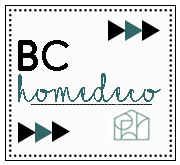
<style>
.page{position:relative;width:180px;height:165px;background:#fbfbfb}
.page>*{position:absolute;margin:0}
.t1{font:48px "AntipastoPro-DemiBold";letter-spacing:0.025em;color:#000000}
.t2{font:42px "ILoveGlitter";letter-spacing:0.025em;color:#336666}
</style>
<div class="page">
<p class="t1" style="left:18px;top:40px;width:51px;height:31px">BC</p>
<p class="t2" style="left:18px;top:73px;width:143px;height:29px">homedeco</p>
</div>
